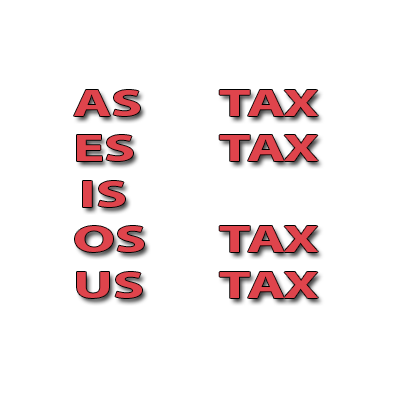
<style>
.page{position:relative;width:400px;height:400px;background:#ffffff}
.page>*{position:absolute;margin:0}
.t1{font:37.9px "MyriadPro-Bold";color:#df444c;scale:1.54 1}
</style>
<div class="page">
<p class="t1" style="left:74px;top:90px;width:244px;height:208px;text-align:center">AS   TAX<br>ES   TAX<br>IS            <br>OS   TAX<br>US   TAX</p>
</div>
